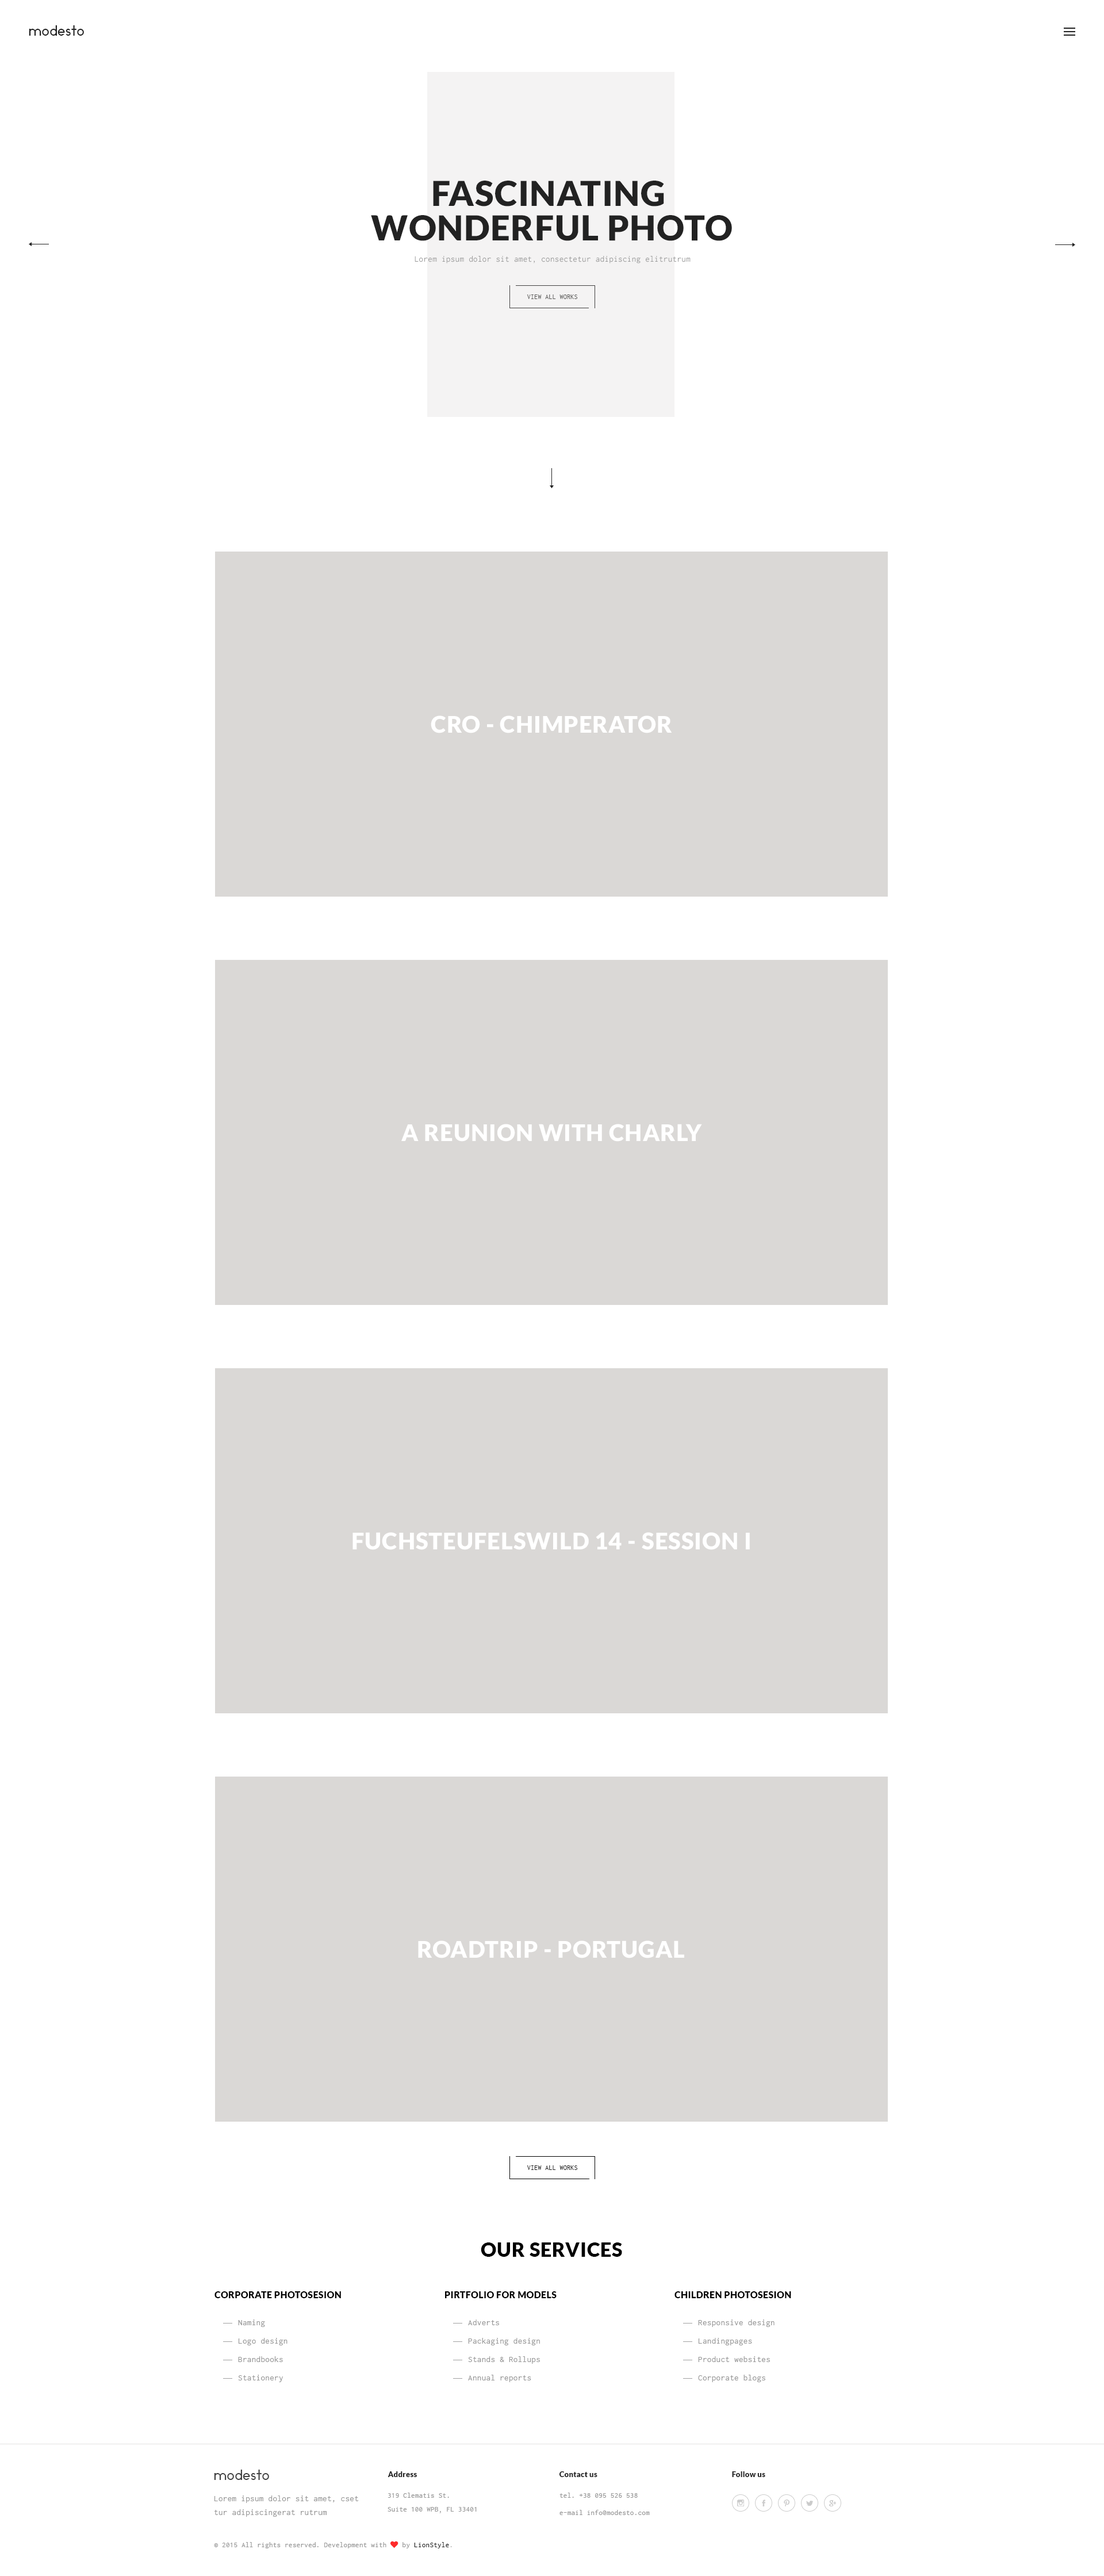
<style>
.page{position:relative;width:1104px;height:2576px;background:#ffffff}
.page>*{position:absolute;margin:0}
.t1{font:13.8px "Ikaros";letter-spacing:0.025em;color:#222222}
.t2{font:34.5px/34.5px "Lato-Black";letter-spacing:0.025em;color:#222222;text-transform:uppercase}
.t3{font:8.6px "Inconsolata";letter-spacing:0.025em;color:#989898}
.t4{font:6.9px "Inconsolata";letter-spacing:0.025em;color:#5a5958;text-transform:uppercase}
.t5{font:23px "Lato-Black";letter-spacing:0.025em;color:#ffffff;text-transform:uppercase}
.t6{font:6.9px "Inconsolata";letter-spacing:0.025em;color:#222222;text-transform:uppercase}
.t7{font:19.6px "Lato-Black";letter-spacing:0.025em;color:#000000;text-transform:uppercase}
.t8{font:9.2px "Lato-Black";letter-spacing:0.025em;color:#000000;text-transform:uppercase}
.t9{font:8.6px/18.4px "Inconsolata";letter-spacing:0.025em;color:#989898}
.t10{font:13.8px "Ikaros";letter-spacing:0.025em;color:#444444}
.t11{font:7.5px "Lato-Black";letter-spacing:0.025em;color:#222222}
.t12{font:8.6px/13.8px "Inconsolata";letter-spacing:0.025em;color:#989898}
.t13{font:7.5px/13.8px "Inconsolata";letter-spacing:0.025em;color:#989898}
.t14{font:7.5px/17.3px "Inconsolata";letter-spacing:0.025em;color:#989898}
.t15{font:7.5px "Inconsolata";letter-spacing:0.025em;color:#989898}
.t16{font:7.5px "FontAwesome";letter-spacing:0.025em;color:#fe2b2b}
.t17{font:7.5px "Inconsolata";letter-spacing:0.025em;color:#222222}
.t18{font:7.5px "Inconsolata";letter-spacing:0.025em;color:#b5b5b5}
</style>
<div class="page">
<p class="t1" style="left:29px;top:25px;width:55px;height:11px">modesto</p>
<p class="t2" style="left:371px;top:181px;width:361px;height:60px;text-align:center">fascinating <br>wonderful PHOTO</p>
<p class="t3" style="left:415px;top:256px;width:276px;height:7px">Lorem ipsum dolor sit amet, consectetur adipiscing elitrutrum</p>
<p class="t4" style="left:527px;top:294px;width:51px;height:5px">view all works</p>
<p class="t5" style="left:431px;top:715px;width:241px;height:18px">Cro - Chimperator</p>
<p class="t5" style="left:401px;top:1124px;width:301px;height:18px">A Reunion With Charly</p>
<p class="t5" style="left:353px;top:1532px;width:397px;height:18px">FUCHSTEUFELSWILD 14 - SESSION I</p>
<p class="t5" style="left:418px;top:1940px;width:266px;height:18px">Roadtrip - Portugal</p>
<p class="t6" style="left:527px;top:2165px;width:51px;height:5px">view all works</p>
<p class="t7" style="left:481px;top:2242px;width:141px;height:15px">our services</p>
<p class="t8" style="left:215px;top:2291px;width:126px;height:7px">CORPORATE photosesion</p>
<p class="t8" style="left:445px;top:2291px;width:112px;height:7px">pirtfolio for models</p>
<p class="t8" style="left:675px;top:2291px;width:116px;height:7px">children photosesion</p>
<p class="t9" style="left:238px;top:2319px;width:50px;height:63px">Naming<br>Logo design<br>Brandbooks<br>Stationery<br>Company documents</p>
<p class="t9" style="left:468px;top:2319px;width:72px;height:63px">Adverts<br>Packaging design<br>Stands &amp; Rollups<br>Annual reports<br>Company documents</p>
<p class="t9" style="left:698px;top:2319px;width:77px;height:63px">Responsive design<br>Landingpages<br>Product websites<br>Corporate blogs<br>Company documents</p>
<p class="t10" style="left:214px;top:2470px;width:55px;height:10px">modesto</p>
<p class="t11" style="left:388px;top:2471px;width:29px;height:6px">Address</p>
<p class="t11" style="left:559px;top:2471px;width:39px;height:6px">Contact us</p>
<p class="t11" style="left:732px;top:2471px;width:33px;height:6px">Follow us</p>
<p class="t12" style="left:214px;top:2495px;width:145px;height:22px">Lorem ipsum dolor sit amet, cset tur adipiscingerat rutrum</p>
<p class="t13" style="left:388px;top:2493px;width:89px;height:20px">319 Clematis St.<br>Suite 100 WPB, FL 33401</p>
<p class="t14" style="left:560px;top:2493px;width:90px;height:22px">tel. +38 095 526 538<br>e-mail info@modesto.com</p>
<p class="t15" style="left:214px;top:2541px;width:238px;height:7px">© 2015 All rights reserved. Development with <span class="t16">♥ </span>by<span class="t17"> LionStyle</span><span class="t18">.</span></p>
</div>
